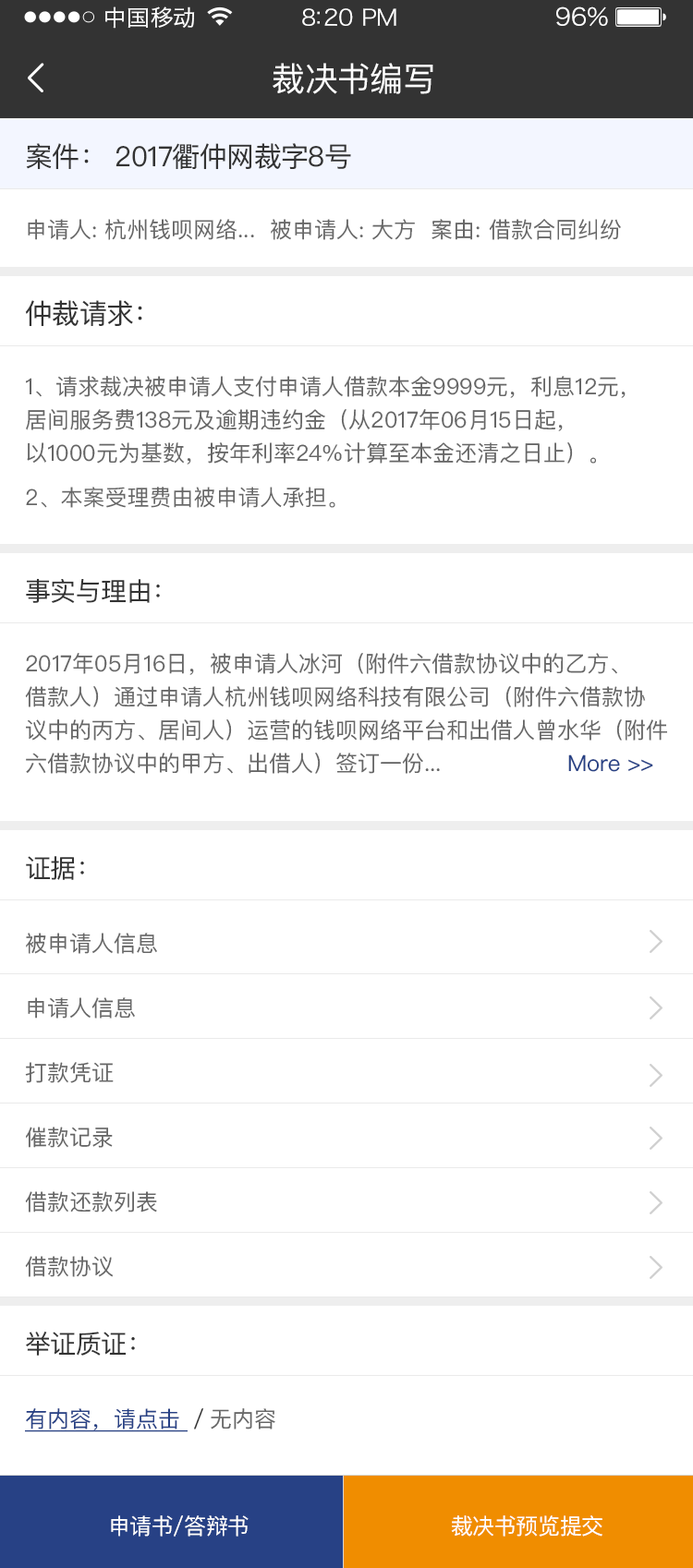
<style>
.page{position:relative;width:693px;height:1568px;background:#ffffff}
.page>*{position:absolute;margin:0}
.t1{font:22.2px "HiraginoSansGB-W3";letter-spacing:0.02em;color:#ffffff;scale:1.03 1}
.t2{font:22.2px "HiraginoSansGB-W3";letter-spacing:-0.02em;color:#ffffff;scale:1.03 1}
.t3{font:24.2px "HiraginoSansGB-W3";letter-spacing:-0.02em;color:#ffffff;scale:1.03 1}
.t4{font:33.2px "PingFangSC-Regular";letter-spacing:-0.02em;color:#ffffff}
.t5{font:27.7px "PingFangSC-Regular";letter-spacing:-0.02em;color:#333333}
.t6{font:22.2px "PingFangSC-Regular";color:#666666}
.t7{font:22.2px/33.2px "PingFangSC-Regular";color:#666666}
.t8{font:25.9px "PingFangSC-Regular";letter-spacing:-0.02em;color:#333333}
.t9{font:22.2px/33.2px "PingFangSC-Regular";color:#274185}
.t10{font:22.2px "PingFangSC-Regular";color:#274185;text-decoration:underline}
.t11{font:22.2px "PingFangSC-Regular";color:#333333}
.t12{font:22.2px "PingFangSC-Regular";letter-spacing:-0.02em;color:#ffffff}
</style>
<div class="page">
<p class="t1" style="left:105px;top:6px;width:90px;height:23px">中国移动</p>
<p class="t2" style="left:302px;top:8px;width:94px;height:18px">8:20 PM</p>
<p class="t3" style="left:556px;top:6px;width:52px;height:21px">96%</p>
<p class="t4" style="left:272px;top:63px;width:161px;height:31px">裁决书编写</p>
<p class="t5" style="left:26px;top:143px;width:325px;height:27px">案件： 2017衢仲网裁字8号</p>
<p class="t6" style="left:28px;top:219px;width:593px;height:21px">申请人: 杭州钱呗网络...  被申请人: 大方  案由: 借款合同纠纷</p>
<p class="t5" style="left:25px;top:300px;width:117px;height:27px">仲裁请求：</p>
<p class="t7" style="left:26px;top:376px;width:599px;height:88px">1、请求裁决被申请人支付申请人借款本金9999元，利息12元，<br>居间服务费138元及逾期违约金（从2017年06月15日起，<br>以1000元为基数，按年利率24%计算至本金还清之日止）。</p>
<p class="t6" style="left:26px;top:487px;width:309px;height:21px">2、本案受理费由被申请人承担。</p>
<p class="t8" style="left:26px;top:578px;width:134px;height:25px">事实与理由：</p>
<p class="t7" style="left:25px;top:653px;width:642px;height:121px">2017年05月16日，被申请人冰河（附件六借款协议中的乙方、<br>借款人）通过申请人杭州钱呗网络科技有限公司（附件六借款协<br>议中的丙方、居间人）运营的钱呗网络平台和出借人曾水华（附件<br>六借款协议中的甲方、出借人）签订一份...     <span class="t9">            More &gt;&gt;</span></p>
<p class="t8" style="left:26px;top:856px;width:58px;height:24px">证据：</p>
<p class="t6" style="left:26px;top:933px;width:131px;height:21px">被申请人信息</p>
<p class="t6" style="left:28px;top:997px;width:107px;height:22px">申请人信息</p>
<p class="t6" style="left:25px;top:1062px;width:89px;height:21px">打款凭证</p>
<p class="t6" style="left:26px;top:1127px;width:87px;height:21px">催款记录</p>
<p class="t6" style="left:25px;top:1191px;width:132px;height:21px">借款还款列表</p>
<p class="t6" style="left:25px;top:1256px;width:89px;height:21px">借款协议</p>
<p class="t8" style="left:26px;top:1332px;width:109px;height:24px">举证质证：</p>
<p class="t10" style="left:25px;top:1408px;width:250px;height:24px">有内容，请点击 <span class="t11">／</span><span class="t6">无内容</span></p>
<p class="t12" style="left:111px;top:1515px;width:137px;height:22px">申请书/答辩书</p>
<p class="t12" style="left:451px;top:1515px;width:151px;height:22px">裁决书预览提交</p>
</div>
